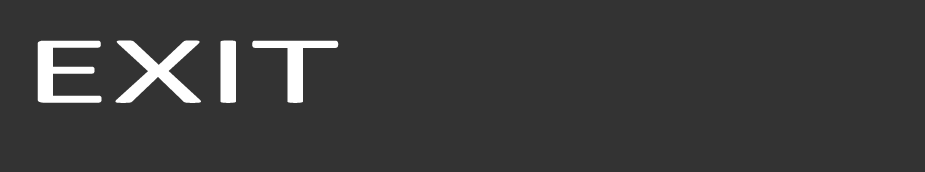
<style>
.page{position:relative;width:925px;height:172px;background:#333333}
.page>*{position:absolute;margin:0}
.t1{font:97.7px "Calibri";color:#ffffff;scale:1.86 1}
</style>
<div class="page">
<p class="t1" style="left:37px;top:40px;width:302px;height:63px">EXIT</p>
</div>
